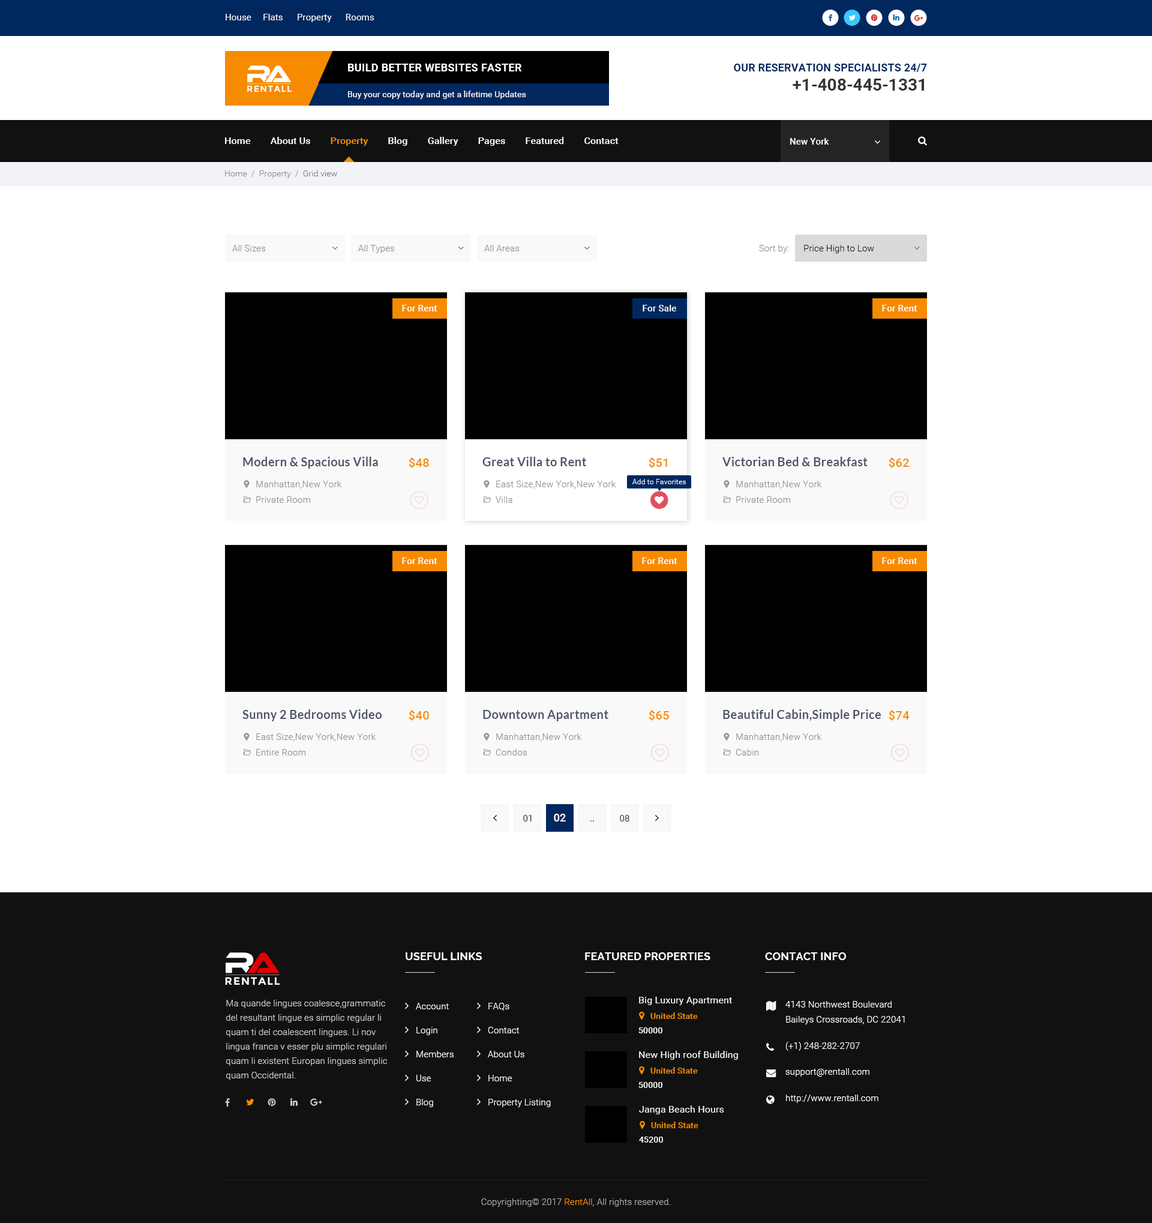
<style>
.page{position:relative;width:1152px;height:1223px;background:#ffffff}
.page>*{position:absolute;margin:0}
.t1{font:9px "Roboto-Regular";letter-spacing:0.01em;color:#ffffff}
.t2{font:10.8px "Roboto-Bold";letter-spacing:0.02em;color:#ffffff;text-transform:uppercase}
.t3{font:10.8px "Roboto-Bold";letter-spacing:0.01em;color:#00285f;text-transform:uppercase}
.t4{font:8.7px "Montserrat-Bold";letter-spacing:0.08em;color:#ffffff;text-transform:uppercase}
.t5{font:16.8px "Roboto-Bold";color:#333333}
.t6{font:8.4px "Roboto-Regular";letter-spacing:0.01em;color:#ffffff}
.t7{font:9.6px "Roboto-Medium";letter-spacing:0.01em;color:#ffffff}
.t8{font:9.6px "Roboto-Medium";letter-spacing:0.01em;color:#f78b00}
.t9{font:9px "Roboto-Medium";letter-spacing:0.01em;color:#ffffff}
.t10{font:8.4px "Roboto-Light";letter-spacing:0.01em;color:#8a8f9a}
.t11{font:8.4px "Roboto-Light";letter-spacing:0.01em;color:#757983}
.t12{font:9px "Roboto-Light";letter-spacing:0.01em;color:#8a8f9a}
.t13{font:9px "Roboto-Light";letter-spacing:0.01em;color:#111111}
.t14{font:12px "Lato-Bold";letter-spacing:0.01em;color:#4d5567}
.t15{font:12px "Roboto-Medium";letter-spacing:0.01em;color:#f78b00}
.t16{font:7.2px "Roboto-Light";letter-spacing:0.01em;color:#ffffff}
.t17{font:9px "Roboto-Regular";letter-spacing:0.01em;color:#333333}
.t18{font:10.8px "Roboto-Medium";letter-spacing:0.01em;color:#ffffff}
.t19{font:9px "Roboto-Regular";letter-spacing:0.01em}
.t20{font:10.8px "Raleway-Bold";letter-spacing:0.01em;color:#ffffff;text-transform:uppercase}
.t21{font:10.7px "Montserrat-Bold";letter-spacing:0.08em;color:#ffffff;text-transform:uppercase}
.t22{font:9px/14.4px "Roboto-Light";letter-spacing:0.01em;color:#cccccc}
.t23{font:9.6px "Roboto-Regular";letter-spacing:0.01em;color:#ffffff}
.t24{font:9px/15px "Roboto-Light";letter-spacing:0.01em;color:#ffffff}
.t25{font:9px/24px "Roboto-Light";letter-spacing:0.01em;color:#ffffff}
.t26{font:8.4px "Roboto-Medium";letter-spacing:0.01em;color:#f78b00}
.t27{font:8.4px "Roboto-Medium";letter-spacing:0.01em;color:#ffffff;text-transform:uppercase}
.t28{font:9px "Roboto-Light";letter-spacing:0.01em;color:#ffffff}
.t29{font:9px "Roboto-Light";letter-spacing:0.01em;color:#aaaaaa}
.t30{font:9px "Roboto-Light";letter-spacing:0.01em;color:#f78b00}
</style>
<div class="page">
<p class="t1" style="left:226px;top:14px;width:148px;height:8px">House     Flats      Property      Rooms</p>
<p class="t2" style="left:348px;top:64px;width:174px;height:7px">Build better Websites Faster</p>
<p class="t3" style="left:734px;top:64px;width:193px;height:8px">Our Reservation Specialists 24/7</p>
<p class="t4" style="left:247px;top:85px;width:45px;height:7px">RentAll</p>
<p class="t5" style="left:793px;top:79px;width:131px;height:12px">+1-408-445-1331</p>
<p class="t6" style="left:348px;top:91px;width:178px;height:8px">Buy your copy today and get a lifetime Updates</p>
<p class="t7" style="left:225px;top:137px;width:394px;height:9px">Home        About Us        <span class="t8">Property</span>        Blog        Gallery        Pages        Featured        Contact</p>
<p class="t9" style="left:790px;top:138px;width:39px;height:7px">New York</p>
<p class="t10" style="left:225px;top:170px;width:112px;height:8px">Home  /  Property  /  <span class="t11">Grid view</span></p>
<p class="t12" style="left:232px;top:245px;width:34px;height:6px">All Sizes</p>
<p class="t12" style="left:358px;top:245px;width:36px;height:8px">All Types</p>
<p class="t12" style="left:484px;top:245px;width:36px;height:6px">All Areas</p>
<p class="t12" style="left:759px;top:245px;width:30px;height:8px">Sort by:</p>
<p class="t13" style="left:804px;top:245px;width:70px;height:8px">Price High to Low</p>
<p class="t9" style="left:402px;top:305px;width:35px;height:6px">For Rent</p>
<p class="t9" style="left:643px;top:305px;width:33px;height:6px">For Sale</p>
<p class="t9" style="left:882px;top:305px;width:35px;height:6px">For Rent</p>
<p class="t14" style="left:243px;top:457px;width:135px;height:12px">Modern &amp; Spacious Villa</p>
<p class="t15" style="left:409px;top:457px;width:20px;height:11px">$48</p>
<p class="t14" style="left:482px;top:457px;width:104px;height:9px">Great Villa to Rent</p>
<p class="t15" style="left:649px;top:457px;width:18px;height:11px">$51</p>
<p class="t14" style="left:722px;top:457px;width:146px;height:9px">Victorian Bed &amp; Breakfast</p>
<p class="t15" style="left:889px;top:457px;width:20px;height:11px">$62</p>
<p class="t12" style="left:256px;top:481px;width:86px;height:8px">Manhattan,New York</p>
<p class="t12" style="left:496px;top:481px;width:120px;height:8px">East Size,New York,New York</p>
<p class="t16" style="left:632px;top:479px;width:54px;height:5px">Add to Favorites</p>
<p class="t12" style="left:736px;top:481px;width:86px;height:8px">Manhattan,New York</p>
<p class="t12" style="left:256px;top:496px;width:55px;height:7px">Private Room</p>
<p class="t12" style="left:496px;top:496px;width:16px;height:7px">Villa</p>
<p class="t12" style="left:736px;top:496px;width:55px;height:7px">Private Room</p>
<p class="t9" style="left:402px;top:557px;width:35px;height:7px">For Rent</p>
<p class="t9" style="left:642px;top:557px;width:35px;height:7px">For Rent</p>
<p class="t9" style="left:882px;top:557px;width:35px;height:7px">For Rent</p>
<p class="t14" style="left:242px;top:709px;width:140px;height:12px">Sunny 2 Bedrooms Video</p>
<p class="t15" style="left:409px;top:710px;width:20px;height:11px">$40</p>
<p class="t14" style="left:483px;top:710px;width:125px;height:11px">Downtown Apartment</p>
<p class="t15" style="left:649px;top:710px;width:20px;height:11px">$65</p>
<p class="t14" style="left:723px;top:709px;width:158px;height:12px">Beautiful Cabin,Simple Price</p>
<p class="t15" style="left:889px;top:710px;width:21px;height:11px">$74</p>
<p class="t12" style="left:256px;top:733px;width:120px;height:9px">East Size,New York,New York</p>
<p class="t12" style="left:496px;top:733px;width:86px;height:9px">Manhattan,New York</p>
<p class="t12" style="left:736px;top:733px;width:86px;height:9px">Manhattan,New York</p>
<p class="t12" style="left:256px;top:749px;width:50px;height:6px">Entire Room</p>
<p class="t12" style="left:496px;top:749px;width:31px;height:6px">Condos</p>
<p class="t12" style="left:736px;top:749px;width:22px;height:6px">Cabin</p>
<p class="t17" style="left:523px;top:815px;width:9px;height:6px">01</p>
<p class="t18" style="left:554px;top:814px;width:12px;height:7px">02</p>
<p class="t19" style="left:590px;top:820px;width:4px;height:1px">..</p>
<p class="t17" style="left:620px;top:815px;width:9px;height:6px">08</p>
<p class="t20" style="left:406px;top:952px;width:76px;height:8px">Useful Links</p>
<p class="t20" style="left:585px;top:952px;width:125px;height:8px">Featured Properties</p>
<p class="t20" style="left:765px;top:952px;width:81px;height:8px">Contact Info</p>
<p class="t21" style="left:225px;top:977px;width:55px;height:8px">RentAll</p>
<p class="t22" style="left:226px;top:1000px;width:161px;height:80px">Ma quande lingues coalesce,grammatic del resultant lingue es simplic regular li quam ti del coalescent lingues. Li nov lingua franca v esser plu simplic regulari quam li existent Europan lingues simplic quam Occidental.</p>
<p class="t23" style="left:639px;top:997px;width:93px;height:8px">Big Luxury Apartment</p>
<p class="t24" style="left:785px;top:1001px;width:120px;height:23px">4143 Northwest Boulevard<br>Baileys Crossroads, DC 22041</p>
<p class="t25" style="left:416px;top:1003px;width:38px;height:104px">Account<br>Login<br>Members<br>Use<br>Blog</p>
<p class="t25" style="left:488px;top:1003px;width:63px;height:104px">FAQs<br>Contact<br>About Us<br>Home<br>Property Listing</p>
<p class="t26" style="left:650px;top:1012px;width:48px;height:7px">United State</p>
<p class="t27" style="left:638px;top:1027px;width:24px;height:6px">50000</p>
<p class="t28" style="left:785px;top:1042px;width:75px;height:9px">(+1) 248-282-2707</p>
<p class="t23" style="left:639px;top:1051px;width:99px;height:9px">New High roof Building</p>
<p class="t26" style="left:650px;top:1067px;width:48px;height:6px">United State</p>
<p class="t28" style="left:785px;top:1068px;width:84px;height:8px">support@rentall.com</p>
<p class="t27" style="left:638px;top:1082px;width:24px;height:6px">50000</p>
<p class="t28" style="left:786px;top:1094px;width:92px;height:9px">http://www.rentall.com</p>
<p class="t23" style="left:639px;top:1105px;width:85px;height:9px">Janga Beach Hours</p>
<p class="t26" style="left:651px;top:1121px;width:47px;height:7px">United State</p>
<p class="t27" style="left:639px;top:1136px;width:24px;height:6px">45200</p>
<p class="t29" style="left:481px;top:1198px;width:190px;height:9px">Copyrighting© 2017 <span class="t30">RentAll</span>, All rights reserved.</p>
</div>
